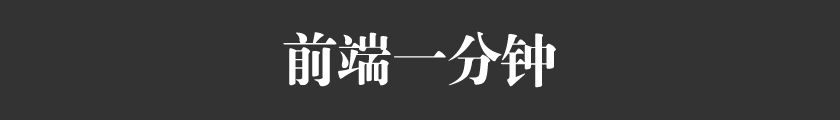
<style>
.page{position:relative;width:840px;height:120px;background:#333333}
.page>*{position:absolute;margin:0}
.t1{font:58.1px "FZDBSJW--GB1-0";letter-spacing:-0.06em;color:#ffffff}
</style>
<div class="page">
<p class="t1" style="left:283px;top:31px;width:273px;height:57px">前端一分钟</p>
</div>
